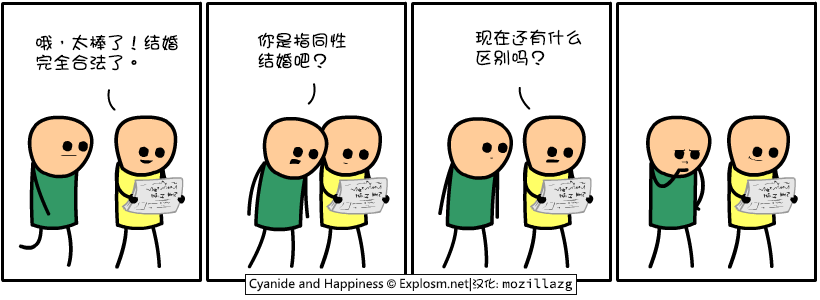
<style>
.page{position:relative;width:820px;height:300px;background:#ffffff}
.page>*{position:absolute;margin:0}
.t1{font:18px/20px "DFGirl";color:#000000}
</style>
<div class="page">
<p class="t1" style="left:475px;top:29px;width:107px;height:37px">现在还有什么<br>区别吗？</p>
<p class="t1" style="left:36px;top:34px;width:142px;height:37px">哦，太棒了！结婚<br>完全合法了。</p>
<p class="t1" style="left:257px;top:32px;width:89px;height:37px">你是指同性<br>结婚吧？</p>
</div>
